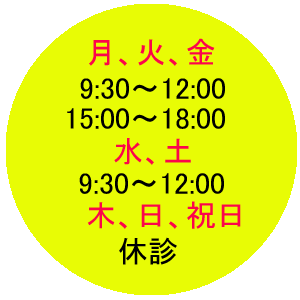
<style>
.page{position:relative;width:300px;height:300px;background:#e8fc05}
.page>*{position:absolute;margin:0}
.t1{font:30px "MS-PGothic";color:#fc054b}
.t2{font:30px "MS-PGothic";color:#000000}
</style>
<div class="page">
<p class="t1" style="left:89px;top:38px;width:126px;height:28px">月、火、金</p>
<p class="t2" style="left:80px;top:78px;width:145px;height:21px">9:30～12:00</p>
<p class="t2" style="left:67px;top:108px;width:158px;height:21px">15:00～18:00</p>
<p class="t1" style="left:114px;top:138px;width:77px;height:27px">水、土</p>
<p class="t2" style="left:79px;top:173px;width:145px;height:21px">9:30～12:00</p>
<p class="t1" style="left:87px;top:201px;width:154px;height:28px">木、日、祝日</p>
<p class="t2" style="left:119px;top:237px;width:58px;height:28px">休診</p>
</div>
